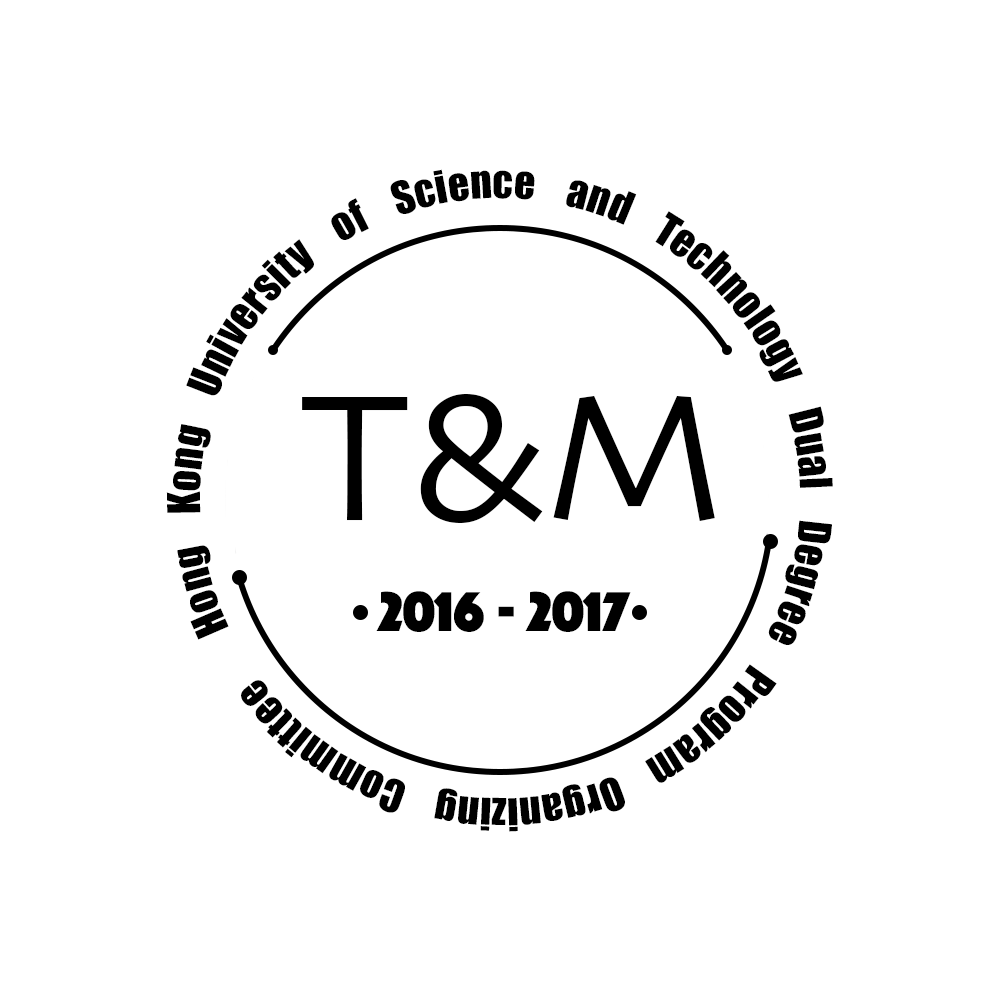
<style>
.page{position:relative;width:1000px;height:1000px;background:#ffffff}
.page>*{position:absolute;margin:0}
.t1{font:41.7px "Impact";color:#000000}
.t2{font:41.7px "LiGothicMed";color:#000000}
.t3{font:187.5px "Skia-Regular";color:#000000}
.t4{font:58.3px "Phosphate-Solid";color:#000000}
</style>
<div class="page">
<p class="t1" style="left:166px;top:169px;width:667px;height:663px;text-align:justify"><span class="t2"> </span>Hong Kong University of Science and Technology Dual Degree Program Organizing Committee</p>
<p class="t3" style="left:302px;top:394px;width:413px;height:129px">T&amp;M</p>
<p class="t4" style="left:376px;top:591px;width:255px;height:41px">2016 - 2017</p>
</div>
